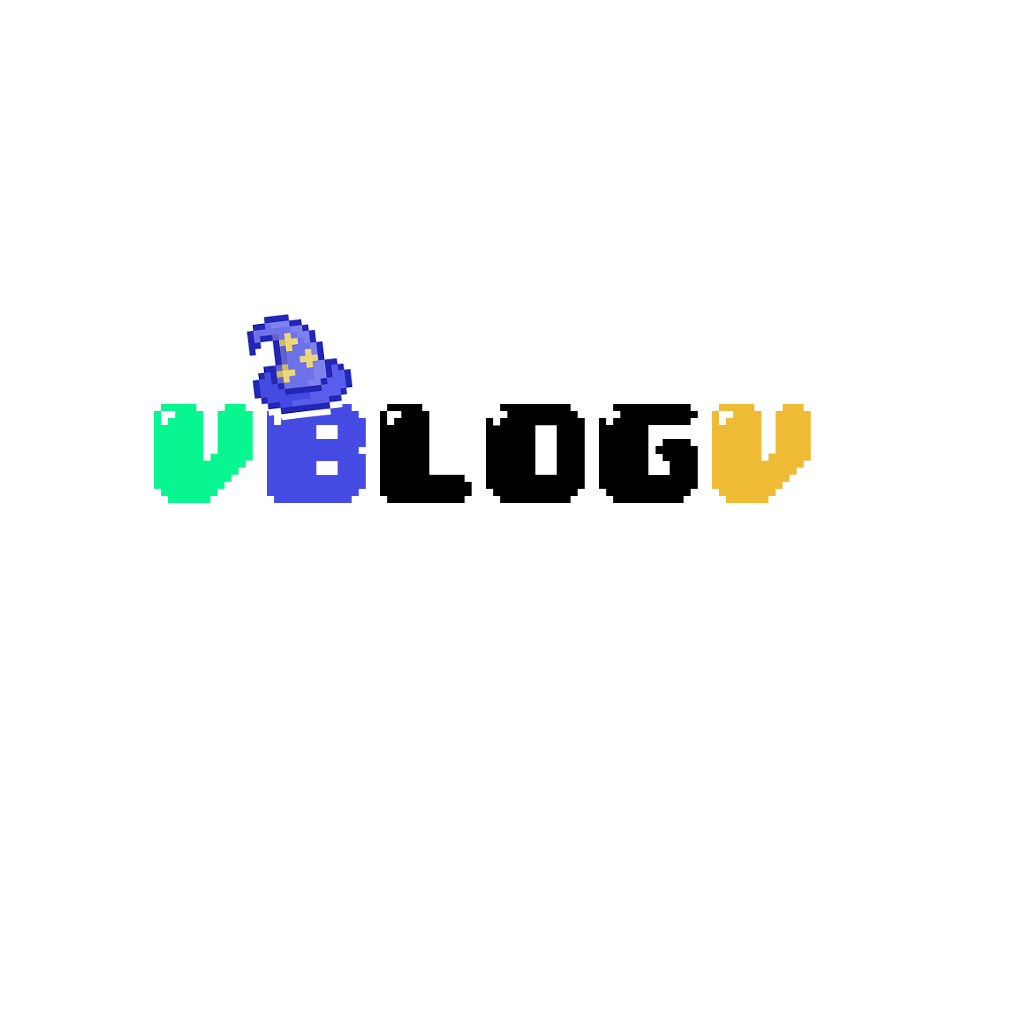
<style>
.page{position:relative;width:1024px;height:1024px;background:#ffffff}
.page>*{position:absolute;margin:0}
.t1{font:120px "04b30";color:#000000}
.t2{font:120px "04b30";color:#08f68f}
.t3{font:120px "04b30";color:#444ae2}
.t4{font:120px "04b30";color:#efbb35}
</style>
<div class="page">
<p class="t1" style="left:154px;top:404px;width:657px;height:99px"><span class="t2">V</span><span class="t3">B</span>LOG<span class="t4">V</span></p>
</div>
